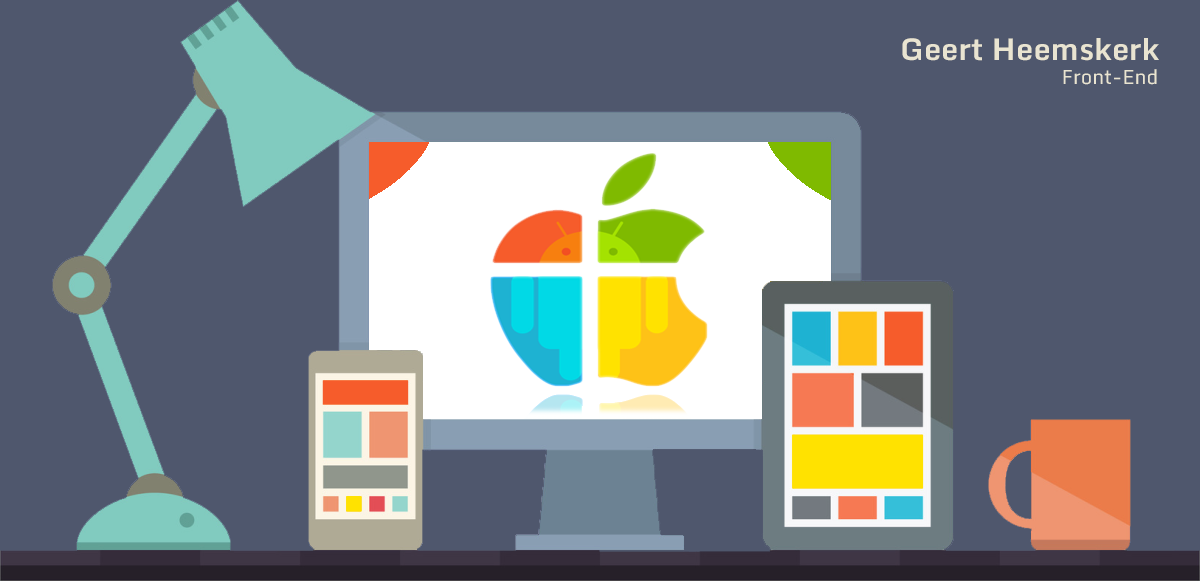
<style>
.page{position:relative;width:1200px;height:581px;background:#4f576d}
.page>*{position:absolute;margin:0}
.t1{font:30px "Monda-Bold";color:#e9e4d1}
.t2{font:20px "Monda-Regular";color:#e9e4d1}
</style>
<div class="page">
<p class="t1" style="left:902px;top:38px;width:257px;height:47px;text-align:center">Geert Heemskerk<br>         <span class="t2">Front-End</span></p>
</div>
